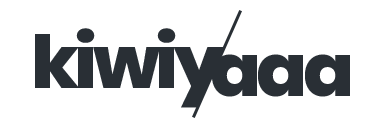
<style>
.page{position:relative;width:388px;height:129px;background:#ffffff}
.page>*{position:absolute;margin:0}
.t1{font:73px "Poppins-ExtraBold";letter-spacing:-0.06em;color:#292f35;scale:1.03 1}
</style>
<div class="page">
<p class="t1" style="left:35px;top:28px;width:189px;height:80px">kiwiy</p>
<p class="t1" style="left:212px;top:54px;width:138px;height:43px">aaa</p>
</div>
